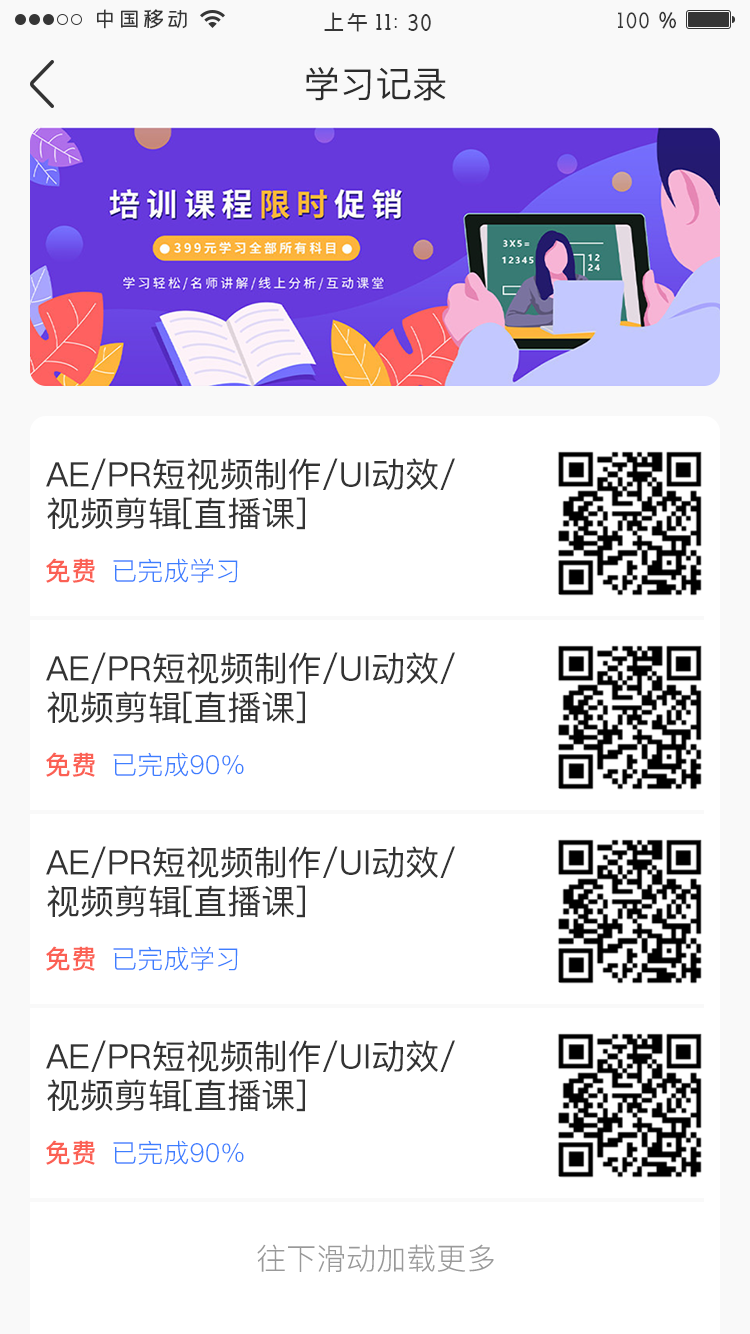
<style>
.page{position:relative;width:750px;height:1334px;background:#ffffff}
.page>*{position:absolute;margin:0}
.t1{font:36px "PingFang-SC-Medium";color:#2c2c2c;text-transform:uppercase}
.t2{font:34px/39px "PingFang-SC-Medium";color:#333333;text-transform:uppercase}
.t3{font:26px "PingFang-SC-Bold";color:#fb6054;text-transform:uppercase}
.t4{font:26px "PingFang-SC-Regular";color:#3d7eff;text-transform:uppercase}
.t5{font:30px "PingFang-SC-Regular";color:#999999}
</style>
<div class="page">
<p class="t1" style="left:306px;top:67px;width:140px;height:34px">学习记录</p>
<p class="t2" style="left:46px;top:458px;width:409px;height:72px">AE/PR短视频制作/UI动效/<br>视频剪辑[直播课]</p>
<p class="t3" style="left:46px;top:558px;width:49px;height:25px">免费</p>
<p class="t4" style="left:113px;top:558px;width:125px;height:25px">已完成学习</p>
<p class="t2" style="left:46px;top:652px;width:409px;height:72px">AE/PR短视频制作/UI动效/<br>视频剪辑[直播课]</p>
<p class="t3" style="left:46px;top:752px;width:49px;height:25px">免费</p>
<p class="t4" style="left:113px;top:752px;width:131px;height:25px">已完成90%</p>
<p class="t2" style="left:46px;top:846px;width:409px;height:72px">AE/PR短视频制作/UI动效/<br>视频剪辑[直播课]</p>
<p class="t3" style="left:46px;top:946px;width:49px;height:25px">免费</p>
<p class="t4" style="left:113px;top:946px;width:125px;height:25px">已完成学习</p>
<p class="t2" style="left:46px;top:1040px;width:409px;height:72px">AE/PR短视频制作/UI动效/<br>视频剪辑[直播课]</p>
<p class="t3" style="left:46px;top:1140px;width:49px;height:25px">免费</p>
<p class="t4" style="left:113px;top:1140px;width:131px;height:25px">已完成90%</p>
<p class="t5" style="left:257px;top:1244px;width:237px;height:28px">往下滑动加载更多</p>
</div>
